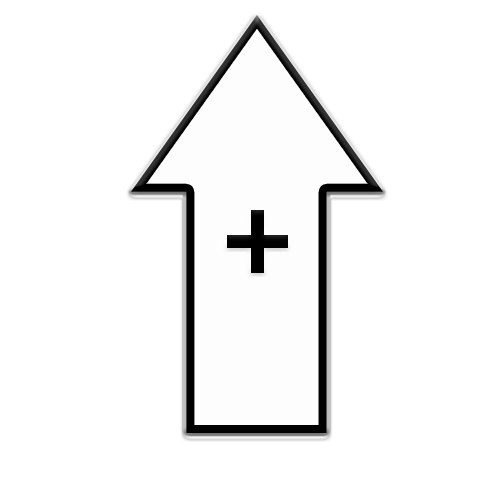
<style>
.page{position:relative;width:500px;height:500px;background:#ffffff}
.page>*{position:absolute;margin:0}
.t1{font:125px "FranklinGothic-Demi";color:#000000}
</style>
<div class="page">
<p class="t1" style="left:227px;top:210px;width:61px;height:63px">+</p>
</div>
